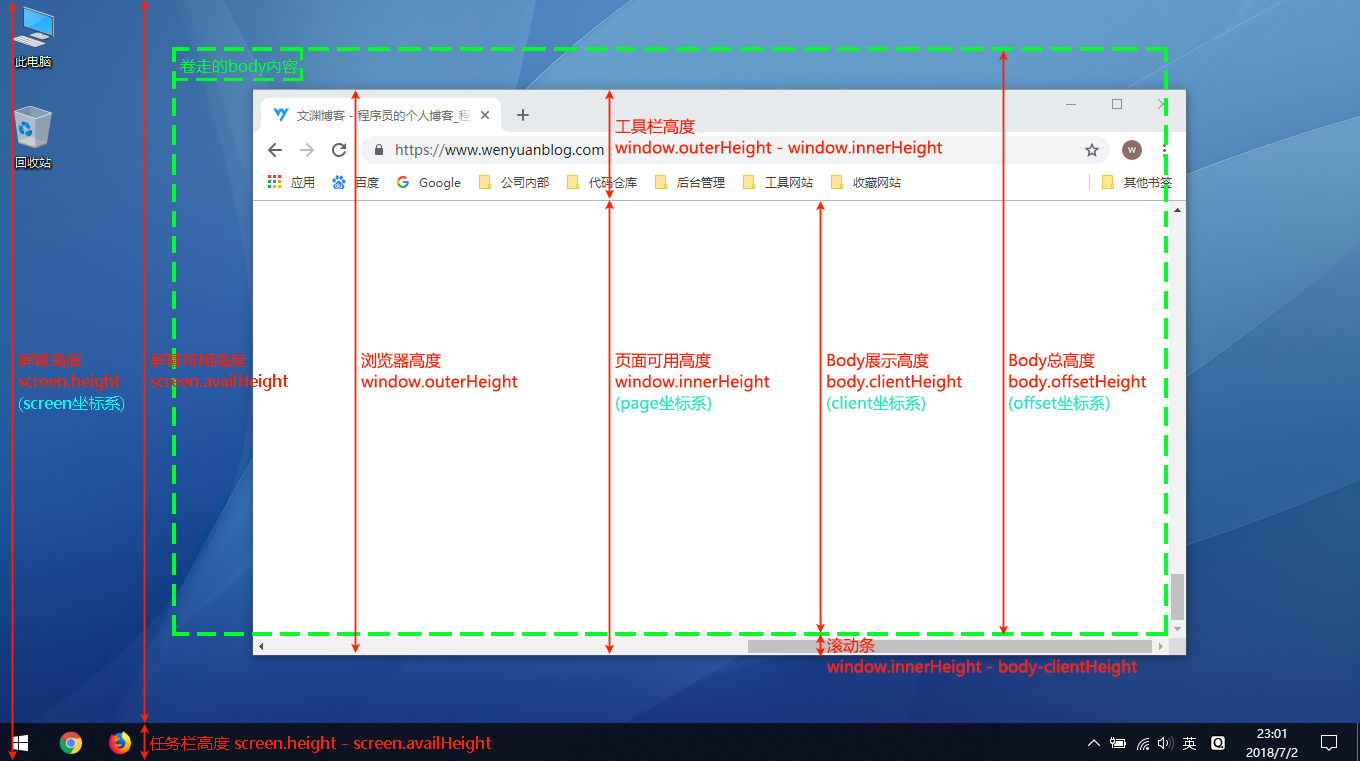
<style>
.page{position:relative;width:1360px;height:761px;background:#ffffff}
.page>*{position:absolute;margin:0}
.t1{font:16px/21.3px "MicrosoftYaHei";color:#ff2200}
.t2{font:16px/21.3px "MicrosoftYaHei";color:#00fff0}
.t3{font:16px/21.3px "MicrosoftYaHei";color:#2ae4c5}
.t4{font:16px "MicrosoftYaHei";color:#ff2200}
</style>
<div class="page">
<p class="t1" style="left:615px;top:118px;width:328px;height:40px">工具栏高度<br>window.outerHeight - window.innerHeight</p>
<p class="t1" style="left:18px;top:353px;width:106px;height:59px">屏幕高度<br>screen.height<br><span class="t2">(screen坐标系)</span></p>
<p class="t1" style="left:150px;top:353px;width:138px;height:38px">屏幕可用高度<br>screen.availHeight</p>
<p class="t1" style="left:361px;top:352px;width:157px;height:40px">浏览器高度<br>window.outerHeight</p>
<p class="t1" style="left:615px;top:352px;width:155px;height:61px">页面可用高度<br>window.innerHeight<br><span class="t3">(page坐标系)</span></p>
<p class="t1" style="left:827px;top:352px;width:135px;height:60px">Body展示高度<br>body.clientHeight<br><span class="t3">(client坐标系)</span></p>
<p class="t1" style="left:1009px;top:352px;width:137px;height:60px">Body总高度<br>body.offsetHeight<br><span class="t3">(offset坐标系)</span></p>
<p class="t1" style="left:827px;top:637px;width:310px;height:40px">滚动条<br>window.innerHeight - body-clientHeight</p>
<p class="t4" style="left:150px;top:736px;width:341px;height:17px">任务栏高度 screen.height - screen.availHeight</p>
</div>
